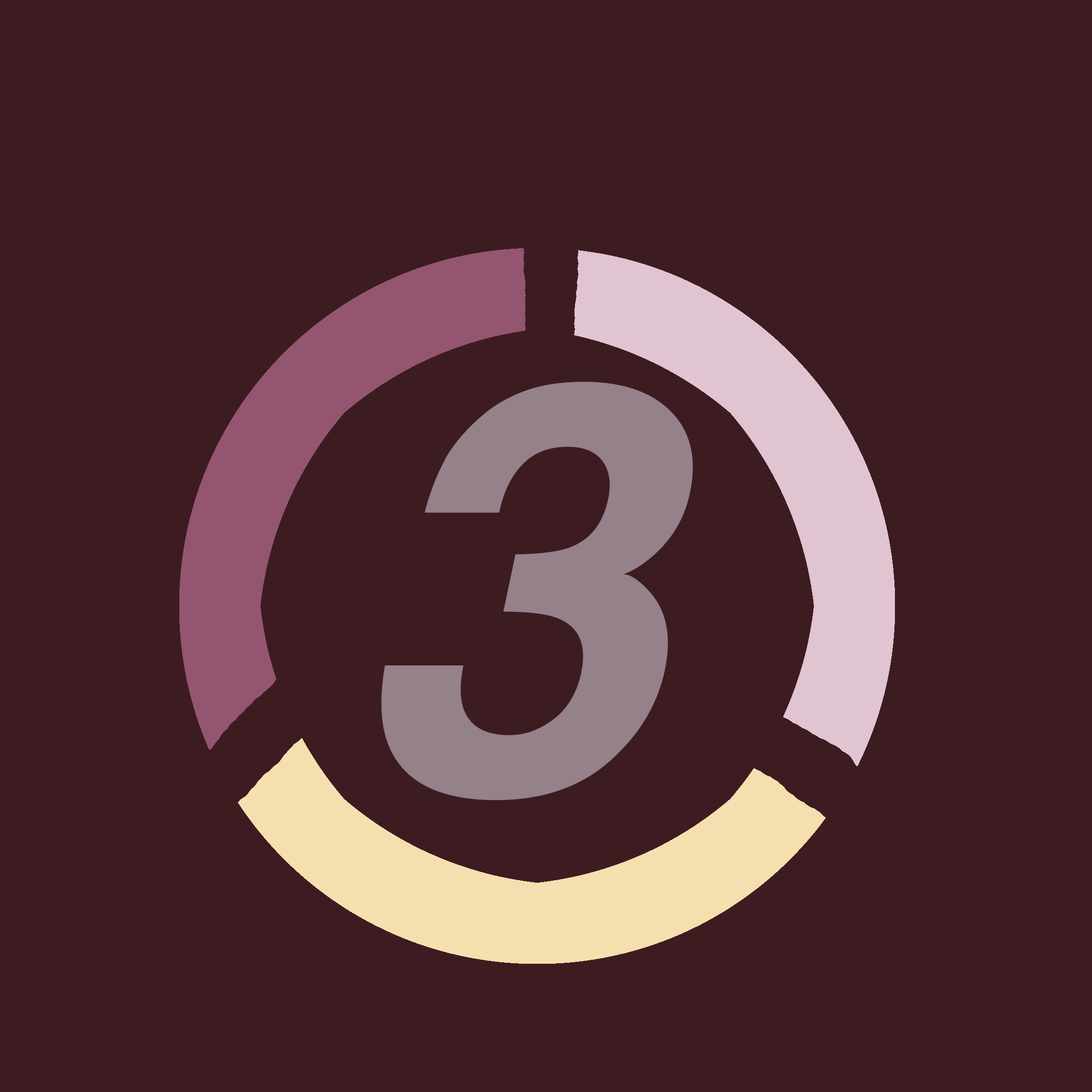
<style>
.page{position:relative;width:1092px;height:1092px;background:#3d1c21}
.page>*{position:absolute;margin:0}
.t1{font:573.3px "Helvetica-BoldOblique";color:#948189}
</style>
<div class="page">
<p class="t1" style="left:381px;top:382px;width:312px;height:418px">3</p>
</div>
